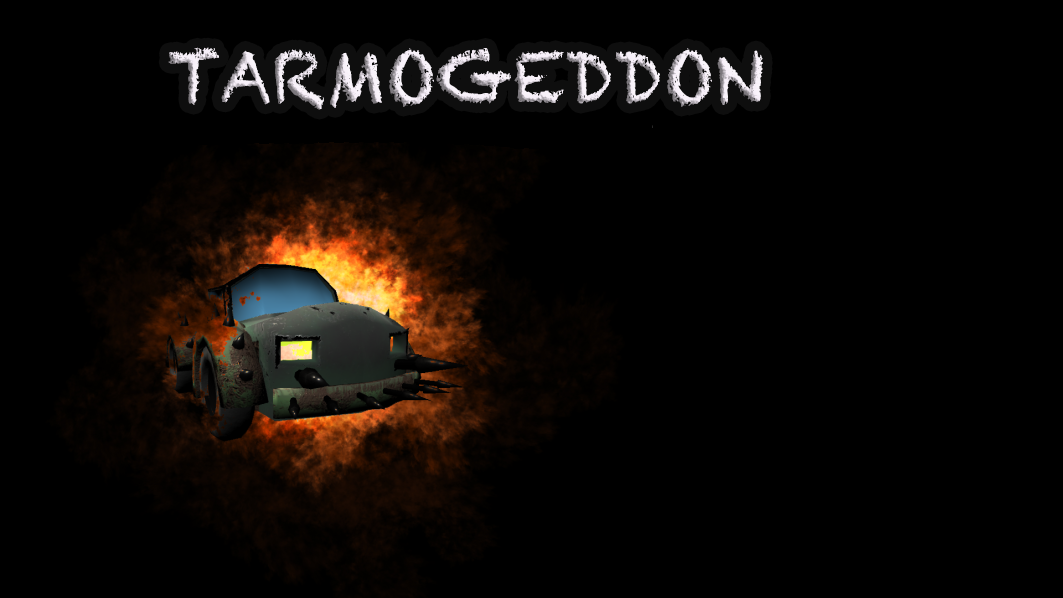
<style>
.page{position:relative;width:1063px;height:598px;background:#000000}
.page>*{position:absolute;margin:0}
.t1{font:70px "Chalkduster"}
</style>
<div class="page">
<p class="t1" style="left:168px;top:47px;width:595px;height:63px">TARMOGEDDON</p>
</div>
